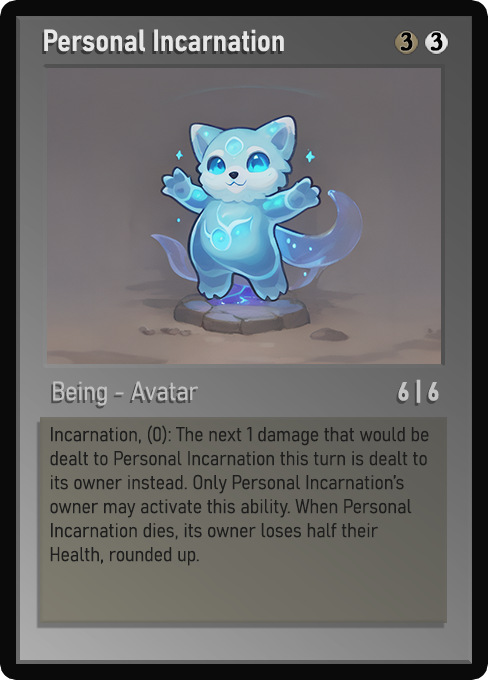
<style>
.page{position:relative;width:488px;height:680px}
.page>*{position:absolute;margin:0}
.t1{font:30px "Bahnschrift-SemiBoldSemiCondensed";color:#f2f2f2;font-weight:bold}
.t2{font:25px "WTRRoycroft";color:#000000;font-weight:bold;scale:1.09 1}
.t3{font:26px "Bahnschrift-LightSemiCondensed";color:#c8c8c8;font-weight:bold}
.t4{font:26px "Bahnschrift-BoldSemiCondensed";color:#c3c3c3;font-weight:bold}
.t5{font:20px "Bahnschrift-LightSemiCondensed";color:#1e1e1e;font-weight:bold}
</style>
<div class="page">
<p class="t1" style="left:44px;top:29px;width:240px;height:23px;opacity:0.9">Personal Incarnation</p>
<p class="t2" style="left:400px;top:32px;width:13px;height:19px">3</p>
<p class="t2" style="left:430px;top:32px;width:13px;height:19px">3</p>
<p class="t3" style="left:53px;top:381px;width:145px;height:25px;opacity:0.9">Being - Avatar</p>
<p class="t4" style="left:398px;top:379px;width:41px;height:24px">6 | 6</p>
<p class="t5" style="left:50px;top:425px;width:379px;height:141px">Incarnation, (0): The next 1 damage that would be dealt to Personal Incarnation this turn is dealt to its owner instead. Only Personal Incarnation’s owner may activate this ability. When Personal Incarnation dies, its owner loses half their Health, rounded up.</p>
</div>
